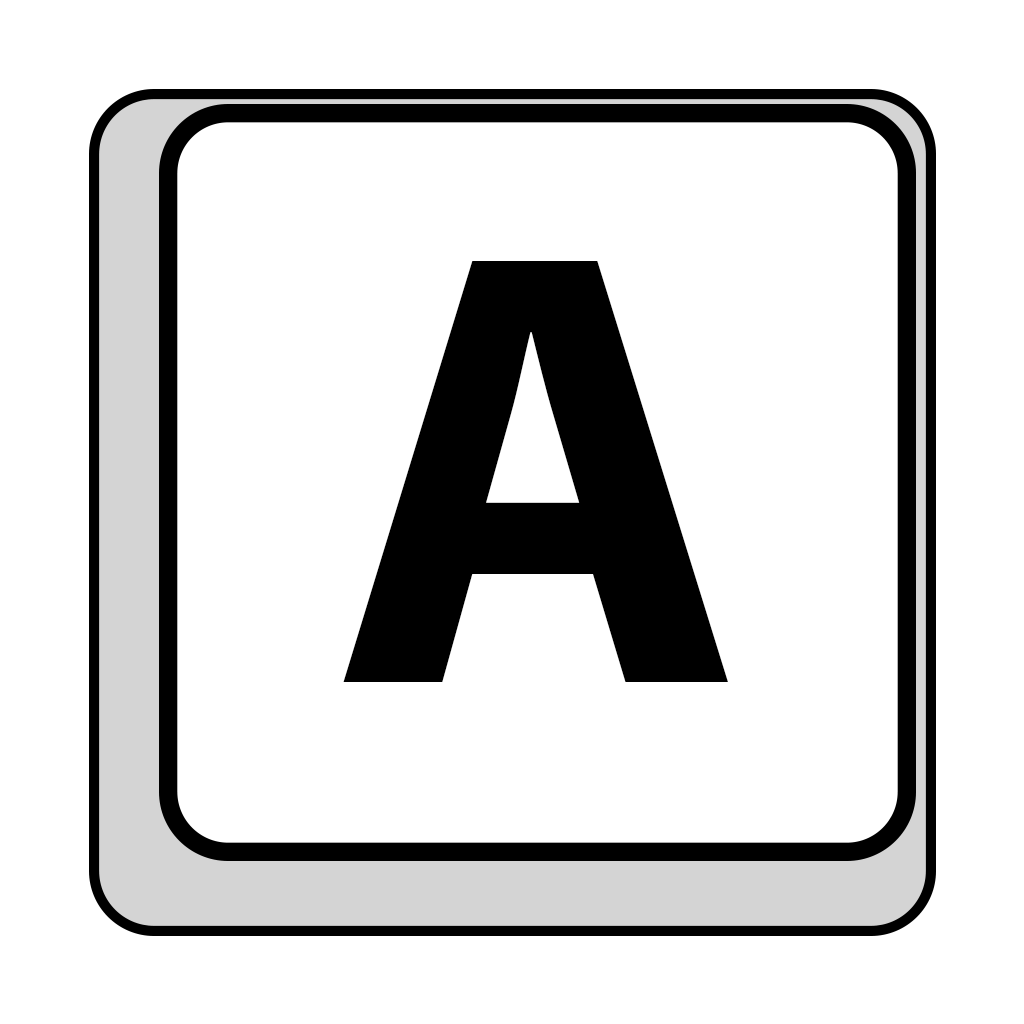
<style>
.page{position:relative;width:1024px;height:1024px;background:#ffffff}
.page>*{position:absolute;margin:0}
.t1{font:625px "MyriadPro-Bold";color:#000000}
</style>
<div class="page">
<p class="t1" style="left:343px;top:261px;width:385px;height:421px">A</p>
</div>
